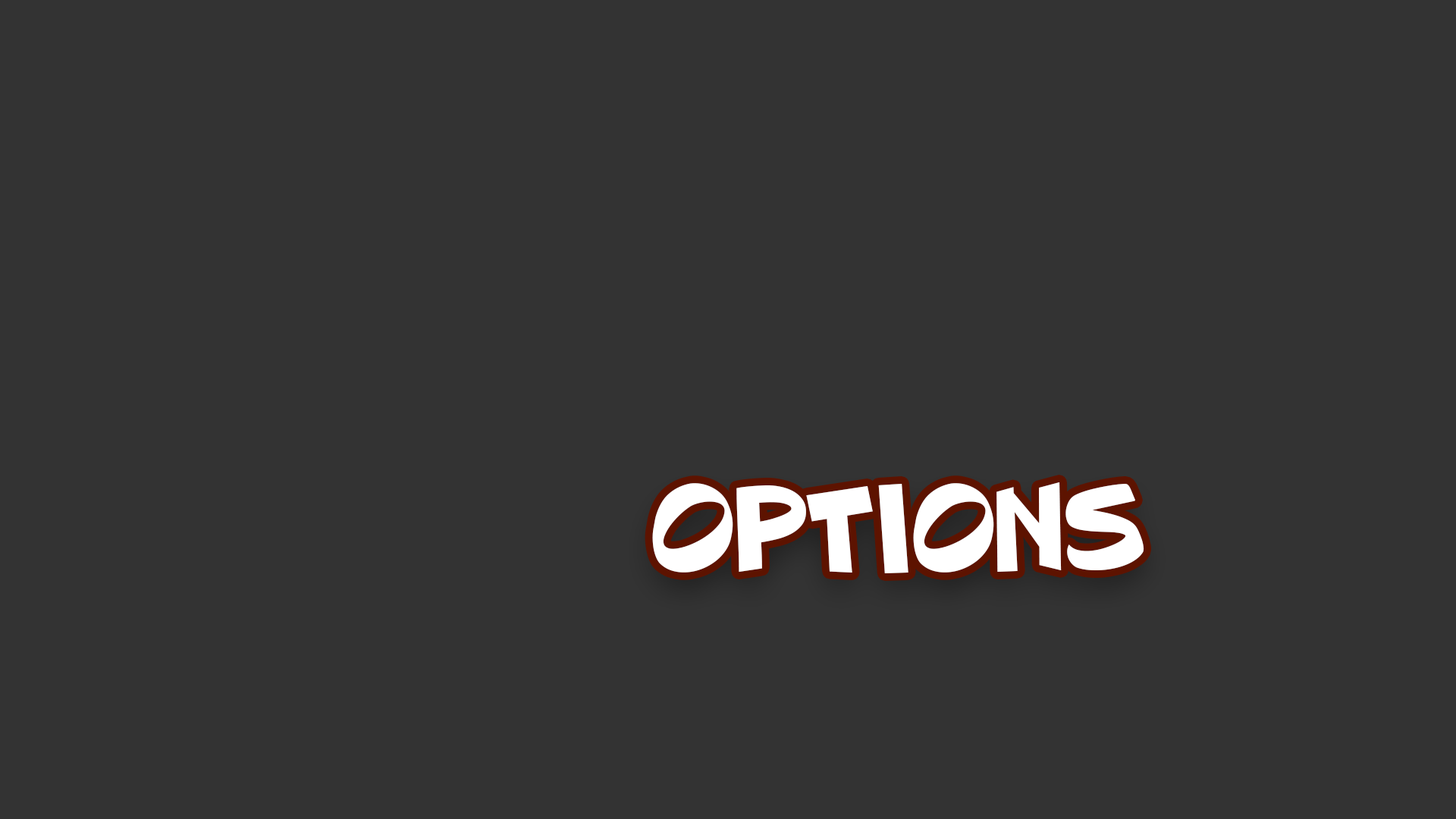
<style>
.page{position:relative;width:1456px;height:819px;background:#333333}
.page>*{position:absolute;margin:0}
.t1{font:136.8px "BLOCKHEADDUDEPersonalUse";color:#ffffff;scale:0.83 1}
</style>
<div class="page">
<p class="t1" style="left:652px;top:482px;width:492px;height:91px">options</p>
</div>
